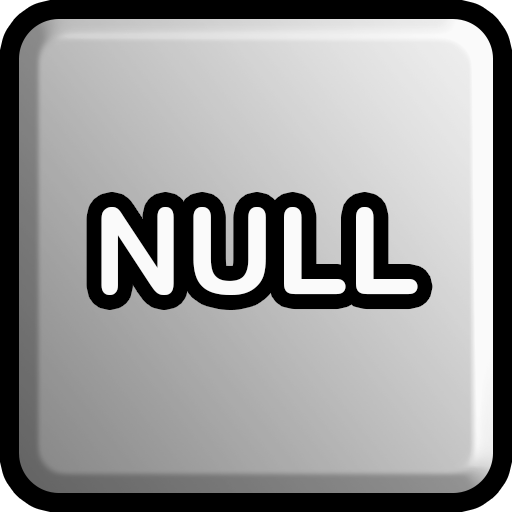
<style>
.page{position:relative;width:512px;height:512px}
.page>*{position:absolute;margin:0}
.t1{font:120px "ArialRoundedMTBold";color:#ffffff}
</style>
<div class="page">
<p class="t1" style="left:101px;top:207px;width:317px;height:88px">NULL</p>
</div>
